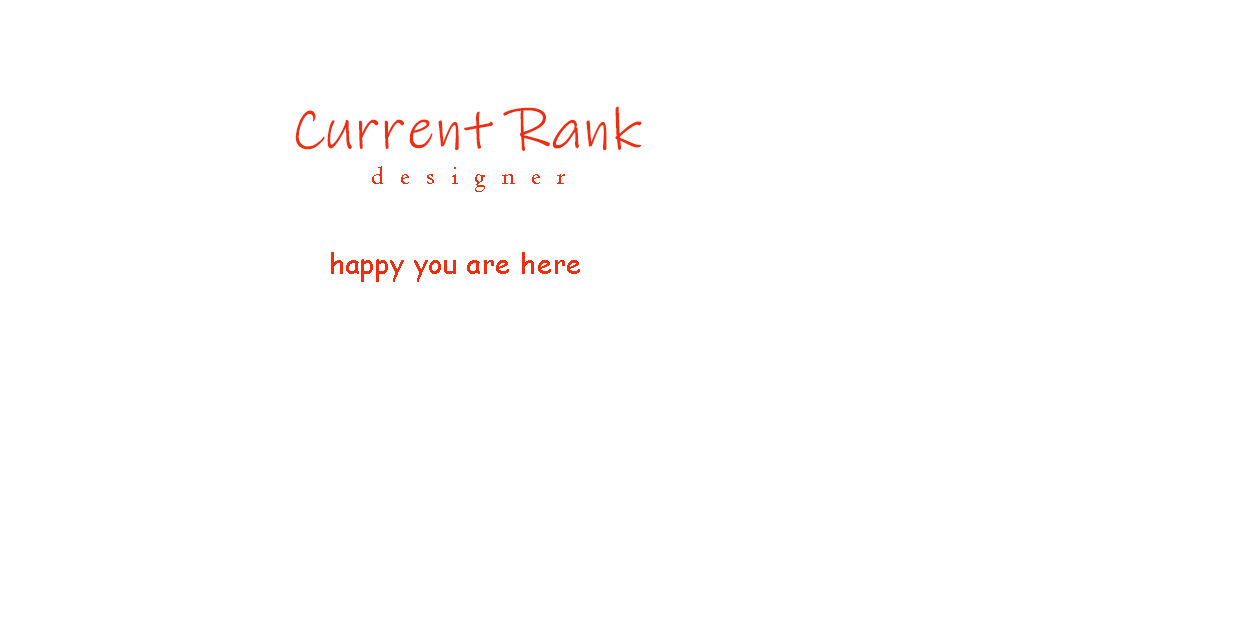
<style>
.page{position:relative;width:1260px;height:630px;background:#ffffff}
.page>*{position:absolute;margin:0}
.t1{font:58.1px "InkFree";letter-spacing:0.03em;color:#ee2e0e}
.t2{font:26.7px "Centaur";letter-spacing:0.03em;color:#ee2e0e}
.t3{font:26.7px "ComicSansMS";letter-spacing:0.03em;color:#ee2e0e}
</style>
<div class="page">
<p class="t1" style="left:295px;top:106px;width:347px;height:45px">Current Rank</p>
<p class="t2" style="left:372px;top:166px;width:193px;height:26px">d  e  s  i  g  n  e  r</p>
<p class="t3" style="left:331px;top:252px;width:249px;height:30px">happy you are here</p>
</div>
